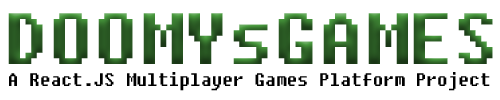
<style>
.page{position:relative;width:500px;height:100px;background:#ffffff}
.page>*{position:absolute;margin:0}
.t1{font:72px "Fixedsys"}
.t2{font:18px "Fixedsys";color:#000000;scale:0.95 1}
</style>
<div class="page">
<p class="t1" style="left:8px;top:13px;width:485px;height:51px">DOOMYsGAMES</p>
<p class="t2" style="left:9px;top:72px;width:481px;height:19px">A React.JS Multiplayer Games Platform Project</p>
</div>
